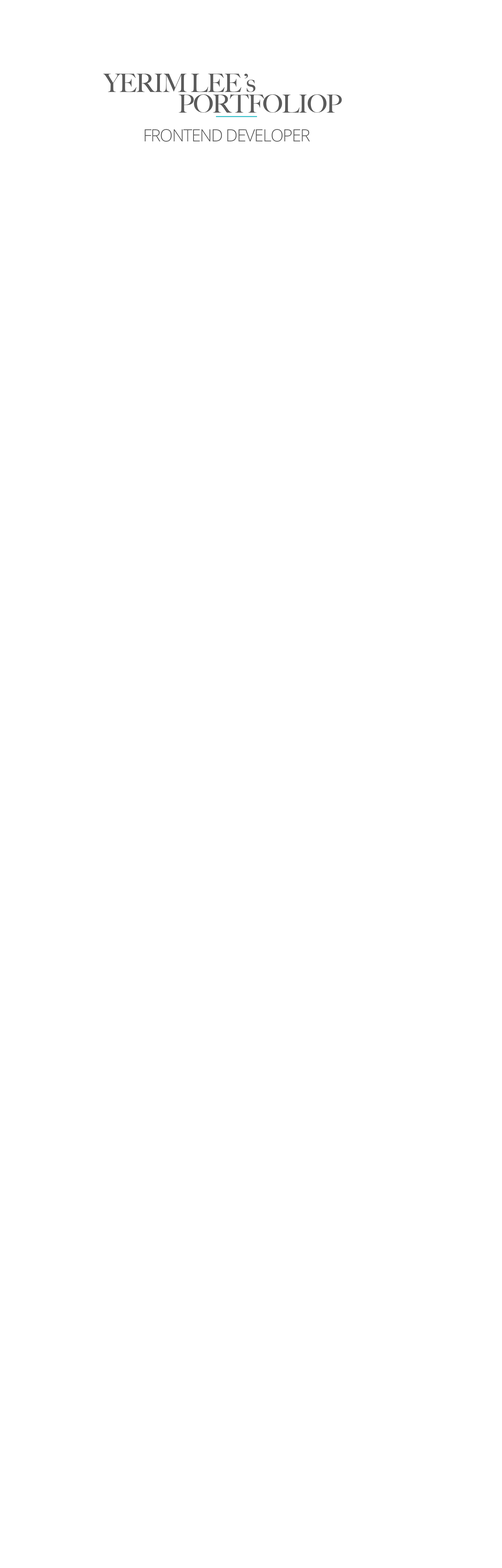
<style>
.page{position:relative;width:502px;height:1568px;background:#ffffff}
.page>*{position:absolute;margin:0}
.t1{font:25.2px "BigCaslon-Medium";letter-spacing:-0.05em;color:#5b5b5b}
.t2{font:25.1px "BigCaslon-Medium";letter-spacing:-0.05em;color:#5b5b5b}
.t3{font:16.9px "OpenSans-Light";letter-spacing:-0.05em;color:#5b5b5b}
</style>
<div class="page">
<p class="t1" style="left:103px;top:74px;width:152px;height:18px">YERIM LEE ’s</p>
<p class="t2" style="left:178px;top:94px;width:164px;height:19px">PORTFOLIOP</p>
<p class="t3" style="left:145px;top:129px;width:165px;height:13px">FRONTEND DEVELOPER</p>
</div>
